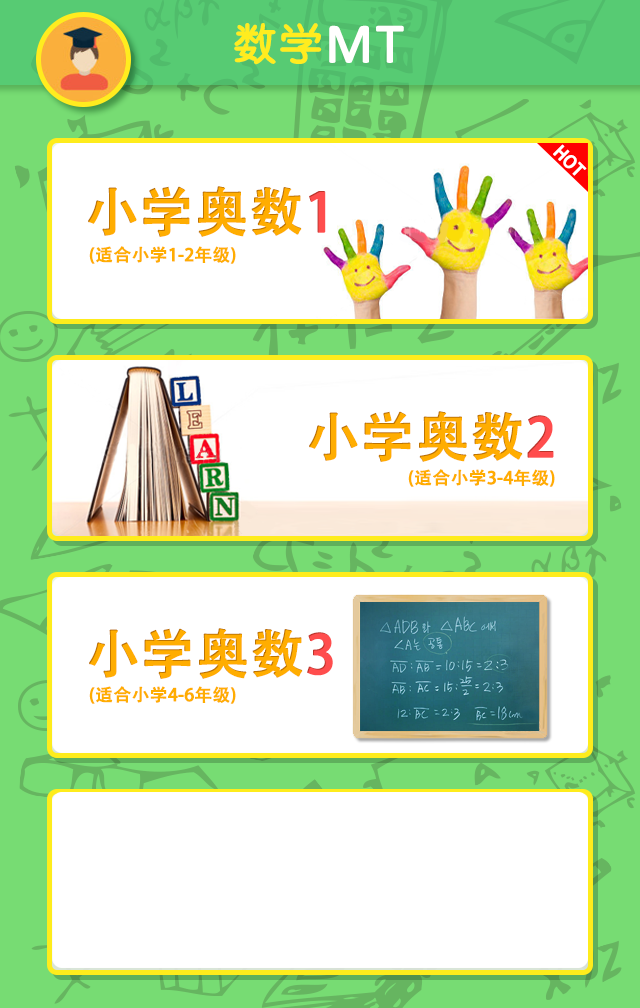
<style>
.page{position:relative;width:640px;height:1008px;background:#ffffff}
.page>*{position:absolute;margin:0}
.t1{font:43.1px "HYe3gj";letter-spacing:0.075em;color:#ffec1f;text-transform:uppercase;font-weight:bold}
.t2{font:55.7px "Calibri";color:#fffffe;text-transform:uppercase;font-weight:bold}
.t3{font:17px "AdobeHeitiStd-Regular";color:#ffffff;text-transform:uppercase;font-weight:bold}
.t4{font:53.3px "AdobeHeitiStd-Regular";color:#ffad01;text-transform:uppercase;font-weight:bold}
.t5{font:53.3px "AdobeHeitiStd-Regular";color:#ff4d4d;text-transform:uppercase;font-weight:bold}
.t6{font:17.2px "AdobeHeitiStd-Regular";color:#ffad01;text-transform:uppercase;font-weight:bold}
</style>
<div class="page">
<p class="t1" style="left:234px;top:23px;width:170px;height:42px">数学<span class="t2">MT</span></p>
<p class="t3" style="left:553px;top:144px;width:34px;height:32px;rotate:45deg">hot</p>
<p class="t4" style="left:88px;top:186px;width:238px;height:51px">小学奥数<span class="t5">1</span></p>
<p class="t6" style="left:89px;top:246px;width:147px;height:18px">(适合小学1-2年级)</p>
<p class="t4" style="left:309px;top:411px;width:245px;height:51px">小学奥数<span class="t5">2</span></p>
<p class="t6" style="left:408px;top:469px;width:147px;height:18px">(适合小学3-4年级)</p>
<p class="t4" style="left:89px;top:628px;width:244px;height:51px">小学奥数<span class="t5">3</span></p>
<p class="t6" style="left:89px;top:686px;width:147px;height:18px">(适合小学4-6年级)</p>
</div>
